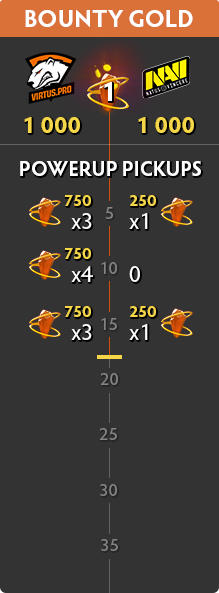
<style>
.page{position:relative;width:219px;height:593px;background:#333333}
.page>*{position:absolute;margin:0}
.t1{font:24px "HypatiaSansPro-Bold";color:#ffffff;text-transform:uppercase}
.t2{font:27.5px "HypatiaSansPro-Bold";color:#ffffff;text-transform:uppercase}
.t3{font:23.9px "HypatiaSansPro-Bold";color:#f4d648;text-transform:uppercase;scale:1.03 1}
.t4{font:20.6px "HypatiaSansPro-Bold";color:#ffffff;text-transform:uppercase}
.t5{font:16px "HypatiaSansPro-Bold";color:#f4d648;text-transform:uppercase}
.t6{font:18px "HypatiaSansPro-Regular";color:#838383;text-transform:uppercase}
.t7{font:24px "HypatiaSansPro-Regular";color:#ffffff}
</style>
<div class="page">
<p class="t1" style="left:25px;top:10px;width:168px;height:17px">bounty gold</p>
<p class="t2" style="left:104px;top:82px;width:8px;height:19px">1</p>
<p class="t3" style="left:24px;top:117px;width:56px;height:16px">1 000</p>
<p class="t3" style="left:138px;top:117px;width:56px;height:16px">1 000</p>
<p class="t4" style="left:20px;top:161px;width:181px;height:15px">powerup pickups</p>
<p class="t5" style="left:65px;top:195px;width:26px;height:11px">750</p>
<p class="t5" style="left:130px;top:195px;width:26px;height:11px">250</p>
<p class="t6" style="left:105px;top:207px;width:8px;height:12px">5</p>
<p class="t7" style="left:71px;top:213px;width:21px;height:16px">x3</p>
<p class="t7" style="left:129px;top:213px;width:19px;height:16px">x1</p>
<p class="t5" style="left:65px;top:248px;width:26px;height:11px">750</p>
<p class="t7" style="left:71px;top:266px;width:22px;height:16px">x4</p>
<p class="t6" style="left:101px;top:262px;width:16px;height:12px">10</p>
<p class="t7" style="left:129px;top:266px;width:11px;height:16px">0</p>
<p class="t5" style="left:65px;top:306px;width:26px;height:11px">750</p>
<p class="t6" style="left:101px;top:318px;width:16px;height:12px">15</p>
<p class="t5" style="left:130px;top:306px;width:26px;height:11px">250</p>
<p class="t7" style="left:71px;top:324px;width:21px;height:16px">x3</p>
<p class="t7" style="left:129px;top:324px;width:19px;height:16px">x1</p>
<p class="t6" style="left:100px;top:373px;width:18px;height:12px">20</p>
<p class="t6" style="left:99px;top:428px;width:18px;height:12px">25</p>
<p class="t6" style="left:100px;top:484px;width:17px;height:12px">30</p>
<p class="t6" style="left:101px;top:539px;width:17px;height:12px">35</p>
</div>
